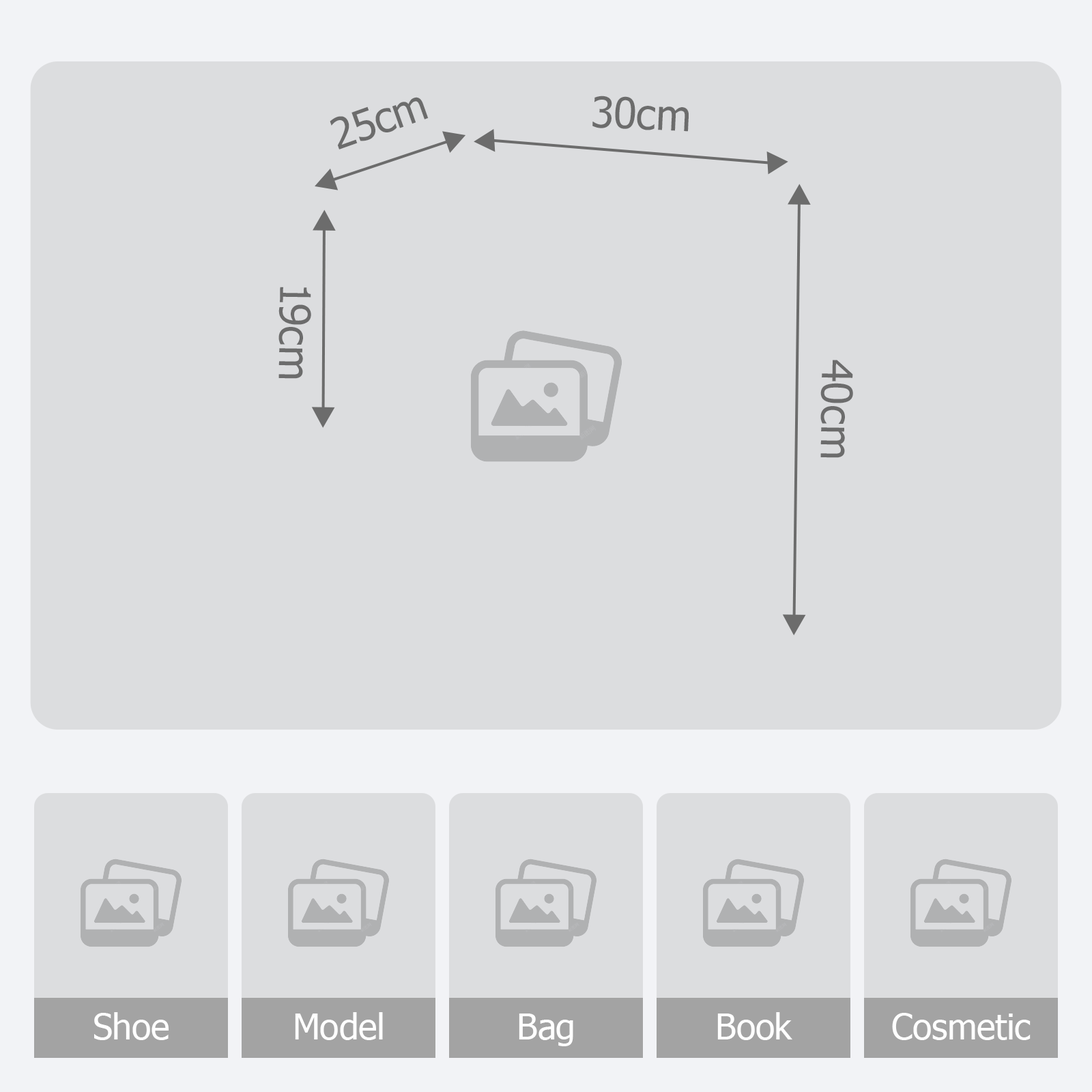
<style>
.page{position:relative;width:1092px;height:1092px;background:#dcdddf}
.page>*{position:absolute;margin:0}
.t1{font:42.2px "Tahoma";color:#6c6c6c}
.t2{font:35.5px "Tahoma";color:#ffffff}
</style>
<div class="page">
<p class="t1" style="left:330px;top:97px;width:99px;height:52px;rotate:-20deg">25cm</p>
<p class="t1" style="left:592px;top:96px;width:97px;height:36px;rotate:3deg">30cm</p>
<p class="t1" style="left:278px;top:287px;width:33px;height:92px;rotate:91deg">19cm</p>
<p class="t1" style="left:820px;top:360px;width:33px;height:98px;rotate:91deg">40cm</p>
<p class="t2" style="left:94px;top:1012px;width:75px;height:28px">Shoe</p>
<p class="t2" style="left:295px;top:1012px;width:88px;height:28px">Model</p>
<p class="t2" style="left:519px;top:1013px;width:54px;height:33px">Bag</p>
<p class="t2" style="left:717px;top:1012px;width:75px;height:28px">Book</p>
<p class="t2" style="left:892px;top:1013px;width:139px;height:27px">Cosmetic</p>
</div>
